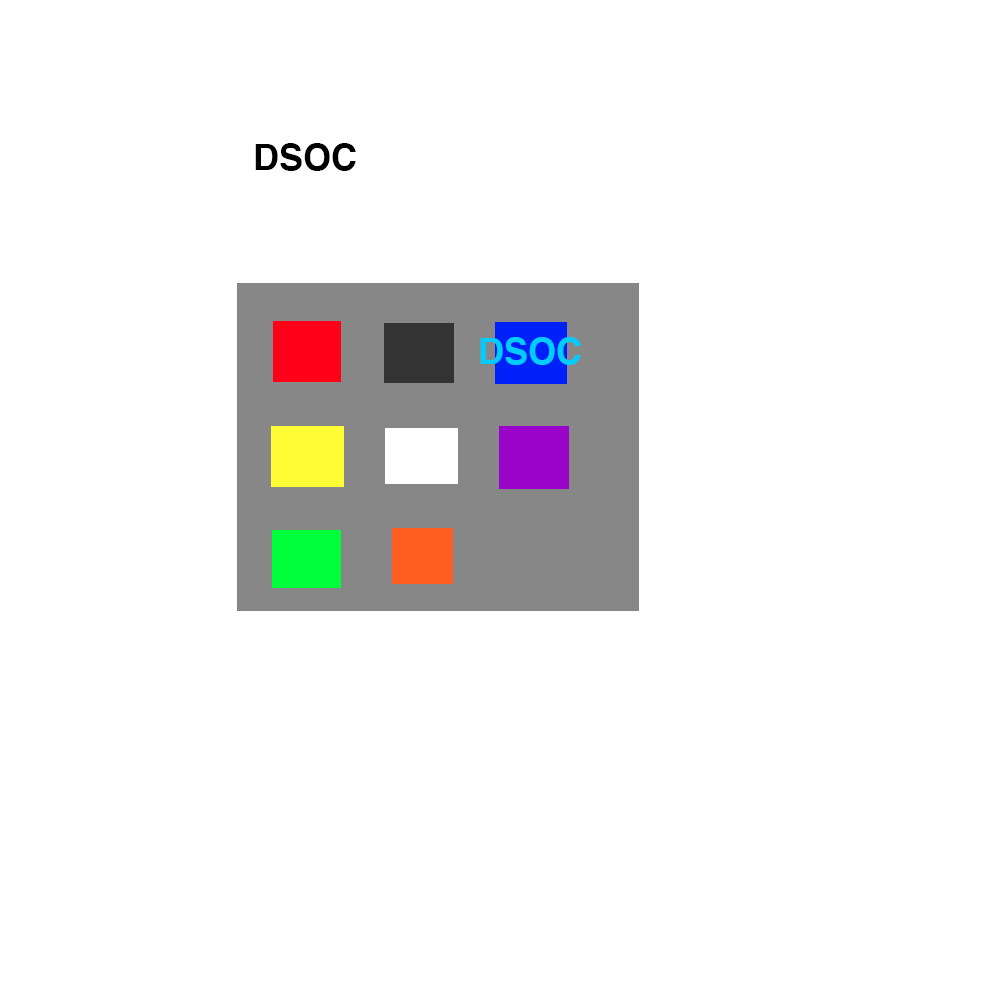
<style>
.page{position:relative;width:1008px;height:982px;background:#ffffff}
.page>*{position:absolute;margin:0}
.t1{font:36px "Helvetica-Bold";color:#000000}
.t2{font:36px "Helvetica-Bold";color:#00ccff}
</style>
<div class="page">
<p class="t1" style="left:255px;top:143px;width:101px;height:28px">DSOC</p>
<p class="t2" style="left:480px;top:337px;width:101px;height:28px">DSOC</p>
</div>
